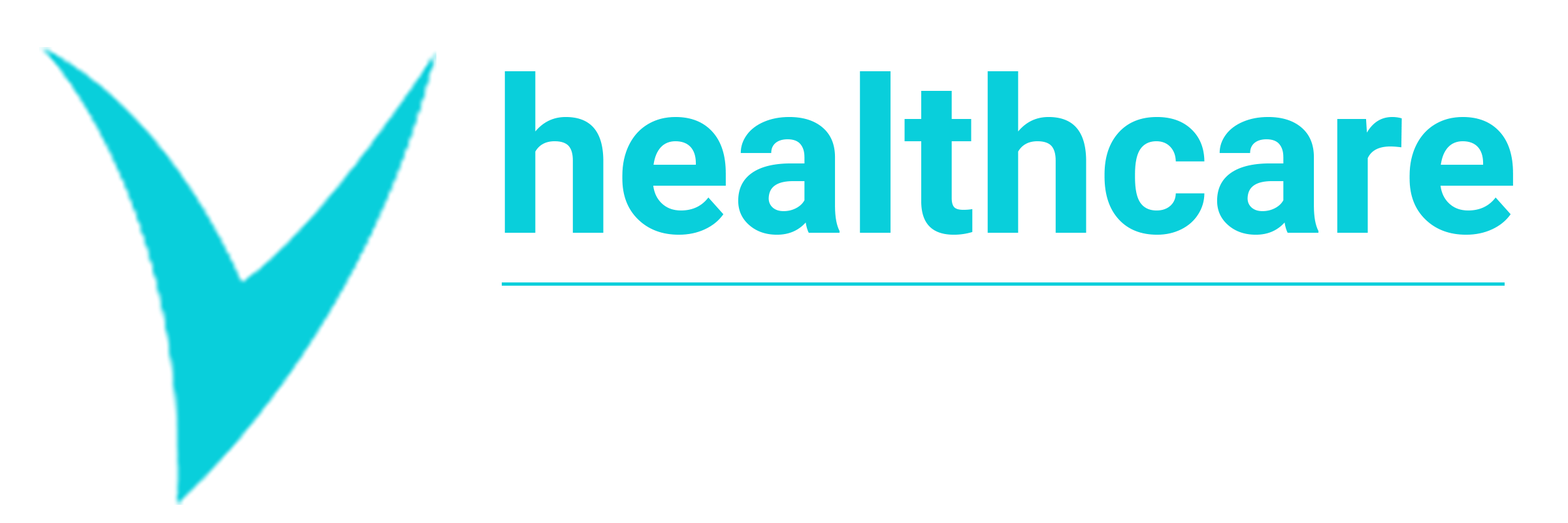
<style>
.page{position:relative;width:1568px;height:523px;background:#ffffff}
.page>*{position:absolute;margin:0}
.t1{font:214.9px/214.9px "Roboto-Bold";color:#09cfdb}
.t2{font:38.7px/214.9px "Roboto-Light";letter-spacing:0.28em;color:#ffffff}
</style>
<div class="page">
<p class="t1" style="left:504px;top:71px;width:1009px;height:378px;text-align:center">healthcare<br><span class="t2">solutions</span></p>
</div>
